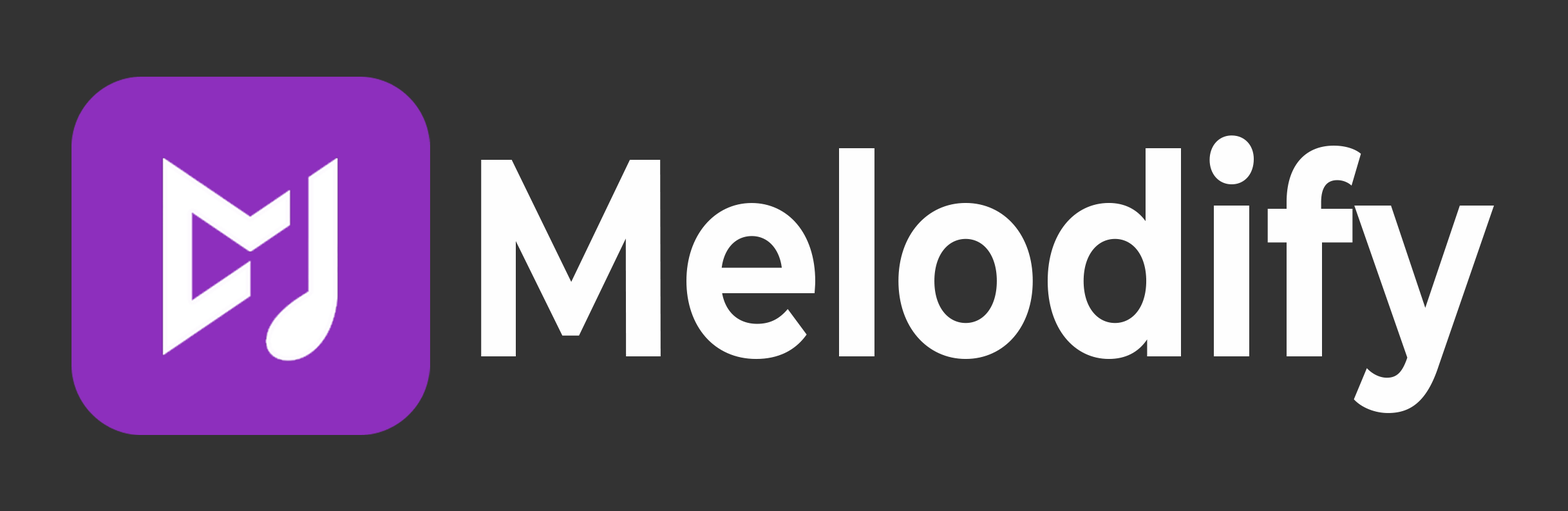
<style>
.page{position:relative;width:1568px;height:511px;background:#333333}
.page>*{position:absolute;margin:0}
.t1{font:280.3px "Montserrat-Bold";color:#fefefe;scale:0.81 1}
</style>
<div class="page">
<p class="t1" style="left:481px;top:135px;width:1013px;height:278px">Melodify</p>
</div>
